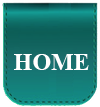
<style>
.page{position:relative;width:100px;height:107px}
.page>*{position:absolute;margin:0}
.t1{font:24px "TimesNewRomanPS-BoldMT";color:#ffffff}
</style>
<div class="page">
<p class="t1" style="left:14px;top:54px;width:75px;height:16px">HOME</p>
</div>
